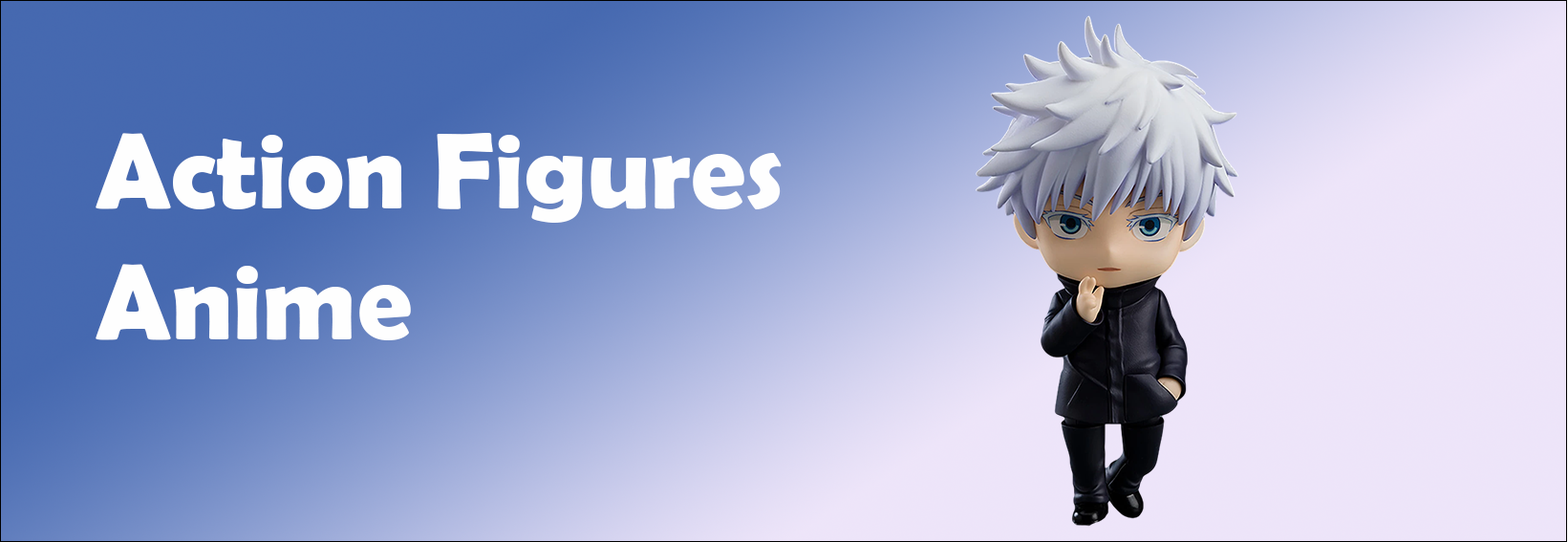
<style>
.page{position:relative;width:1568px;height:542px}
.page>*{position:absolute;margin:0}
.t1{font:108.7px "BerlinSansFBDemi-Bold";color:#fefefe}
</style>
<div class="page">
<p class="t1" style="left:96px;top:133px;width:686px;height:207px">Action Figures<br>Anime</p>
</div>
